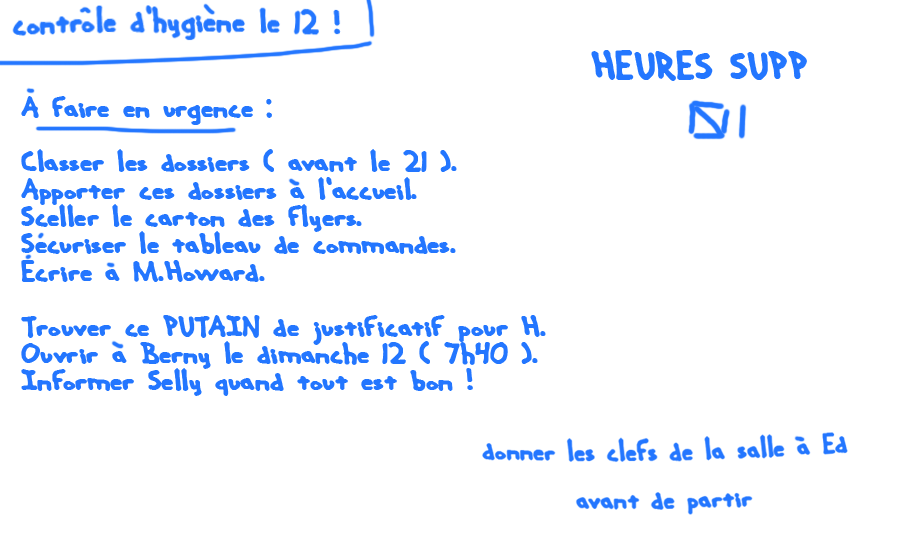
<style>
.page{position:relative;width:900px;height:550px;background:#ffffff}
.page>*{position:absolute;margin:0}
.t1{font:44px "HandMeDownSBRK";color:#2376ff}
.t2{font:33.5px/27.4px "HandMeDownSBRK";color:#2376ff}
.t3{font:33.5px/10.6px "HandMeDownSBRK";color:#2376ff}
</style>
<div class="page">
<p class="t1" style="left:591px;top:50px;width:216px;height:31px">HEURES SUPP</p>
<p class="t2" style="left:21px;top:96px;width:525px;height:300px"><span class="t3">A faire en urgence :</span><br><br>Classer les dossiers ( avant le 21 ).<br>Apporter ces dossiers a l'accueil.<br>Sceller le carton des flyers. <br>Securiser le tableau de commandes.<br>Ecrire a M.Howard.<br><br>Trouver ce PUTAIN de justificatif pour H.<br>Ouvrir a Berny le dimanche 12 ( 7h40 ). <br>Informer Selly quand tout est bon !</p>
</div>
